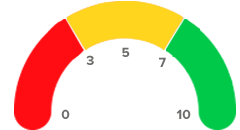
<style>
.page{position:relative;width:240px;height:130px;background:#ffffff}
.page>*{position:absolute;margin:0}
.t1{font:13.6px "ProximaNova-Bold";color:#6c6c6b}
</style>
<div class="page">
<p class="t1" style="left:122px;top:47px;width:8px;height:10px">5</p>
<p class="t1" style="left:86px;top:55px;width:8px;height:10px">3</p>
<p class="t1" style="left:159px;top:57px;width:7px;height:10px">7</p>
<p class="t1" style="left:61px;top:109px;width:9px;height:10px">0</p>
<p class="t1" style="left:176px;top:109px;width:15px;height:10px">10</p>
</div>
